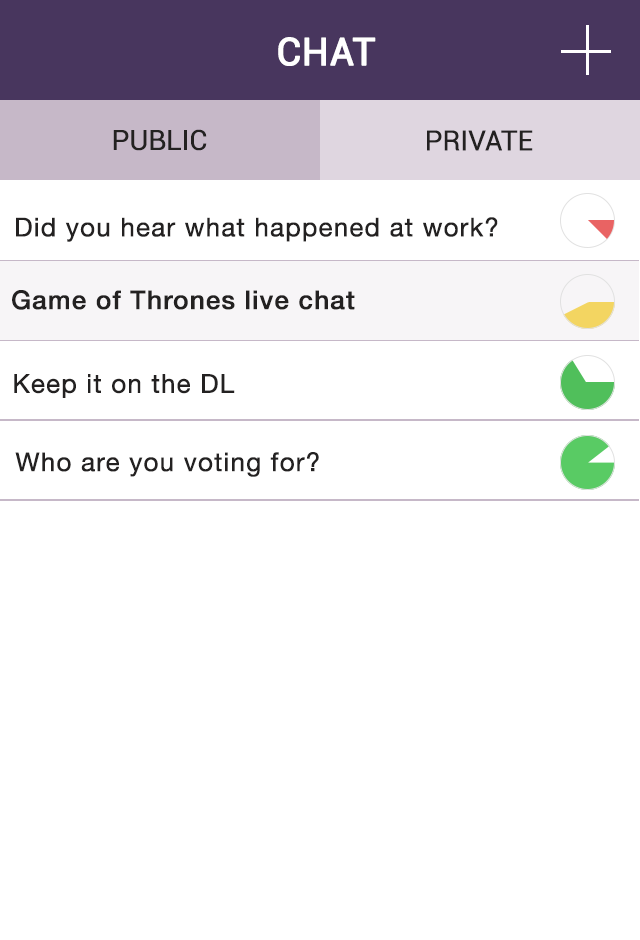
<style>
.page{position:relative;width:640px;height:940px;background:#ffffff}
.page>*{position:absolute;margin:0}
.t1{font:38px "Roboto-Regular";color:#fefefe;font-weight:bold}
.t2{font:28px "Roboto-Regular";color:#232121}
.t3{font:26px "HelveticaNeue";letter-spacing:0.02em;color:#232121;font-weight:bold}
.t4{font:26px "HelveticaNeue-Medium";letter-spacing:0.02em;color:#232121;font-weight:bold}
</style>
<div class="page">
<p class="t1" style="left:278px;top:37px;width:98px;height:29px">CHAT</p>
<p class="t2" style="left:113px;top:129px;width:94px;height:22px">PUBLIC</p>
<p class="t2" style="left:427px;top:130px;width:106px;height:21px">PRIVATE</p>
<p class="t3" style="left:16px;top:217px;width:482px;height:25px">Did you hear what happened at work?</p>
<p class="t4" style="left:12px;top:290px;width:343px;height:20px">Game of Thrones live chat</p>
<p class="t3" style="left:14px;top:374px;width:221px;height:24px">Keep it on the DL</p>
<p class="t3" style="left:15px;top:452px;width:304px;height:25px">Who are you voting for?</p>
</div>
